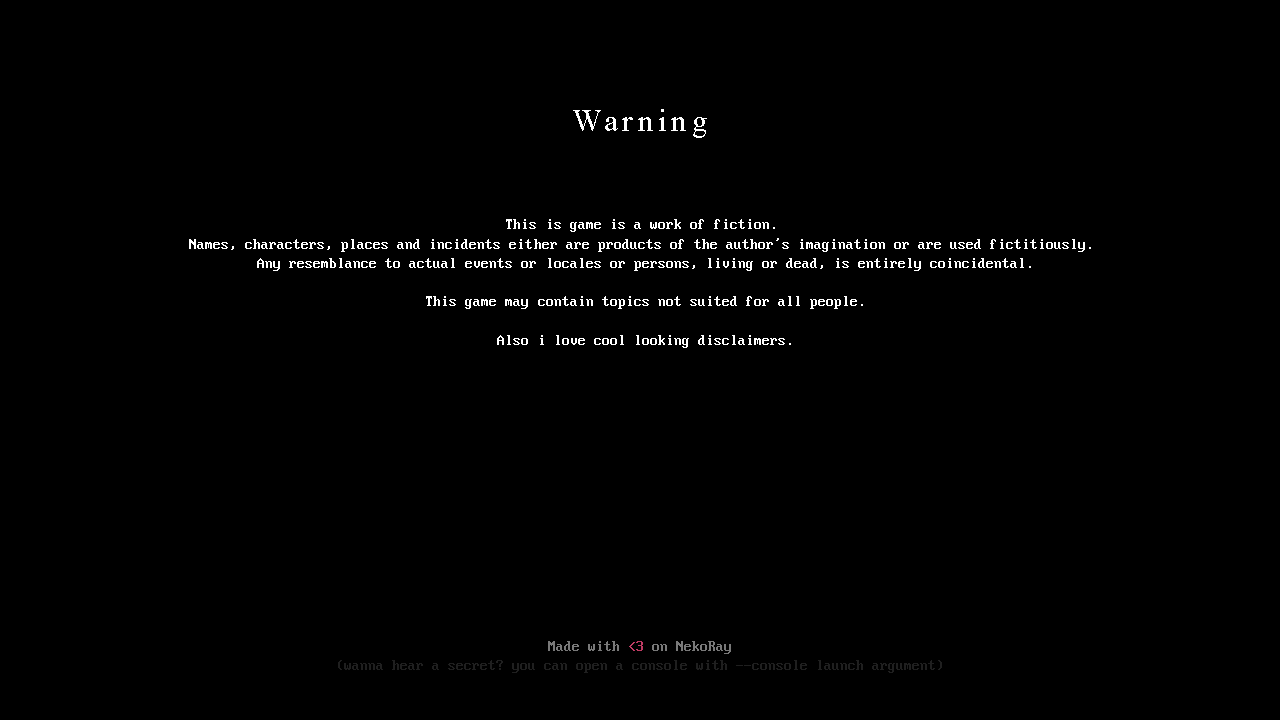
<style>
.page{position:relative;width:1280px;height:720px;background:#000000}
.page>*{position:absolute;margin:0}
.t1{font:32px "TimesNewRomanPSMT";letter-spacing:0.14em;color:#ffffff}
.t2{font:16px "PxPlus_IBM_VGA_8x16";color:#ffffff}
.t3{font:16px "PxPlus_IBM_VGA_8x16";color:#1f1f1f}
.t4{font:16px "PxPlus_IBM_VGA_8x16";color:#797979}
.t5{font:16px "PxPlus_IBM_VGA_8x16";color:#c13c64}
</style>
<div class="page">
<p class="t1" style="left:573px;top:109px;width:134px;height:29px">Warning</p>
<p class="t2" style="left:189px;top:219px;width:902px;height:129px;text-align:center">This is game is a work of fiction. <br>Names, characters, places and incidents either are products of the author’s imagination or are used fictitiously. <br>Any resemblance to actual events or locales or persons, living or dead, is entirely coincidental.<br><br>This game may contain topics not suited for all people.<br><br>Also i love cool looking disclaimers.</p>
<p class="t3" style="left:338px;top:641px;width:604px;height:32px;text-align:center"><span class="t4">Made with </span><span class="t5">&lt;3</span><span class="t4"> on NekoRay<br></span>(wanna hear a secret? you can open a console with --console launch argument)</p>
</div>
